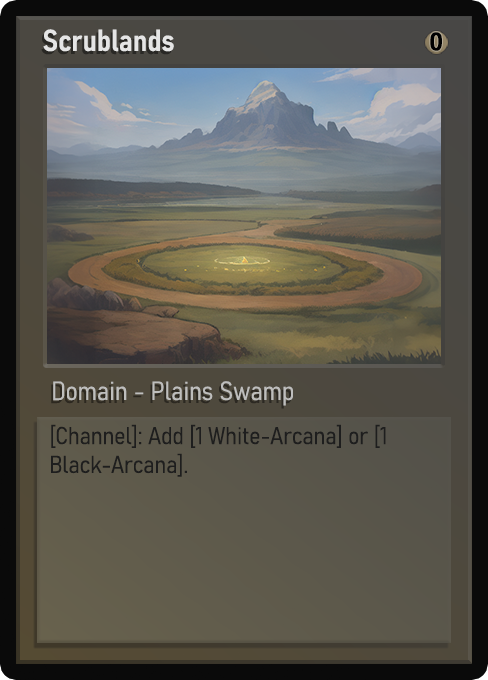
<style>
.page{position:relative;width:488px;height:680px}
.page>*{position:absolute;margin:0}
.t1{font:30px "Bahnschrift-SemiBoldSemiCondensed";color:#f2f2f2;font-weight:bold}
.t2{font:25px "WTRRoycroft";color:#000000;font-weight:bold;scale:1.09 1}
.t3{font:26px "Bahnschrift-LightSemiCondensed";color:#c8c8c8;font-weight:bold}
.t4{font:24px "Bahnschrift-LightSemiCondensed";color:#1e1e1e;font-weight:bold}
</style>
<div class="page">
<p class="t1" style="left:43px;top:29px;width:131px;height:23px;opacity:0.9">Scrublands</p>
<p class="t2" style="left:430px;top:32px;width:12px;height:19px">0</p>
<p class="t3" style="left:53px;top:381px;width:240px;height:25px;opacity:0.9">Domain - Plains Swamp</p>
<p class="t4" style="left:51px;top:424px;width:335px;height:53px">[Channel]: Add [1 White-Arcana] or [1 Black-Arcana].</p>
</div>
